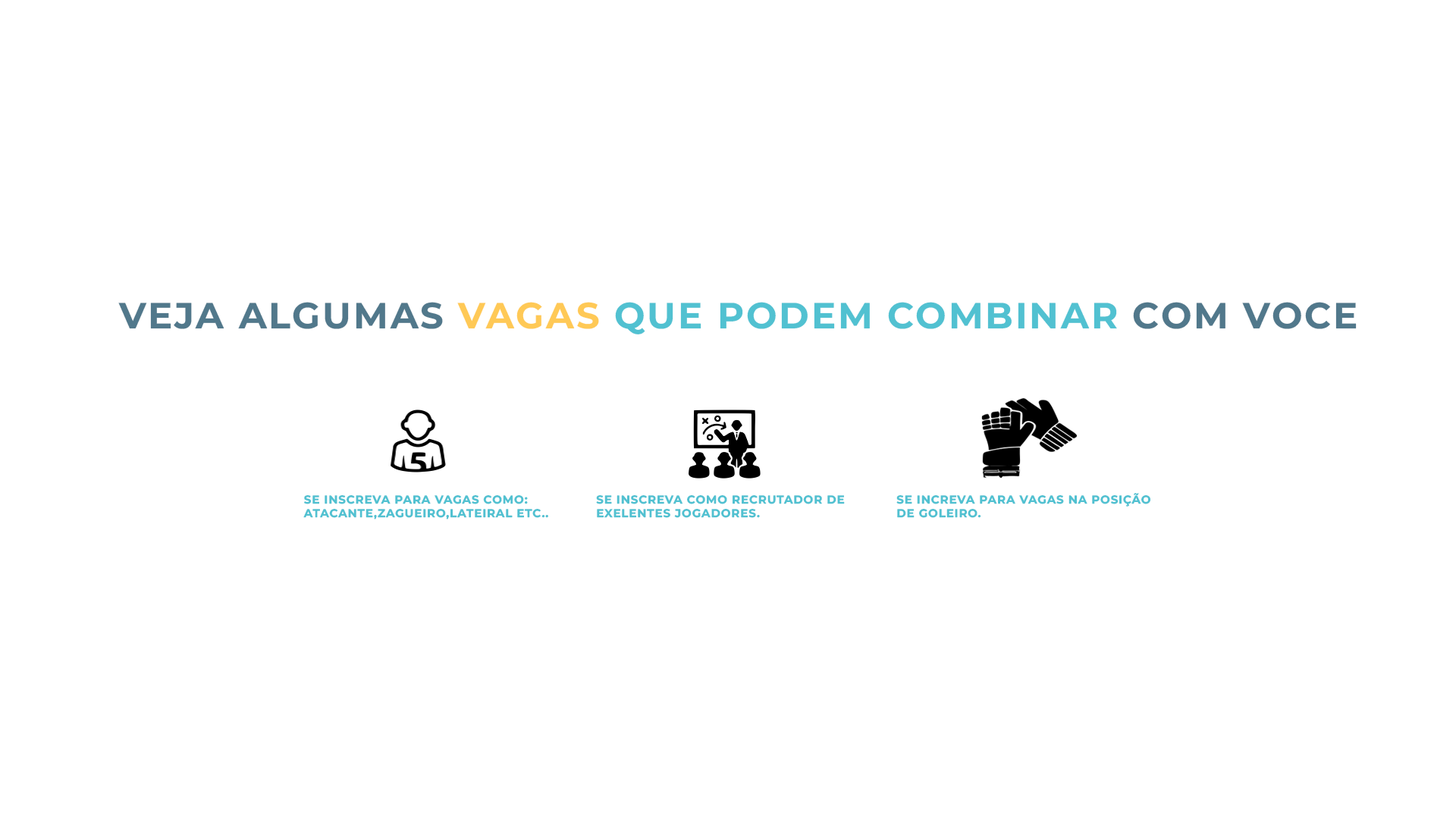
<style>
.page{position:relative;width:1456px;height:819px;background:#ffffff}
.page>*{position:absolute;margin:0}
.t1{font:36.4px "MontserratRoman-Bold";letter-spacing:0.06em;color:#51c1d1}
.t2{font:36.4px "MontserratRoman-Bold";letter-spacing:0.06em;color:#51788b}
.t3{font:36.4px "MontserratRoman-Bold";letter-spacing:0.06em;color:#ffc956}
.t4{font:11.4px "MontserratRoman-Bold";letter-spacing:0.06em;color:#51c1d1}
</style>
<div class="page">
<p class="t1" style="left:118px;top:302px;width:1239px;height:32px"><span class="t2">VEJA ALGUMAS </span><span class="t3">VAGAS </span>QUE PODEM COMBINAR <span class="t2">COM VOCE</span></p>
<p class="t4" style="left:303px;top:495px;width:245px;height:24px;text-align:justify">SE INSCREVA PARA VAGAS COMO:<br>ATACANTE,ZAGUEIRO,LATEIRAL ETC..</p>
<p class="t4" style="left:596px;top:495px;width:249px;height:23px;text-align:justify">SE INSCREVA COMO RECRUTADOR DE<br>EXELENTES JOGADORES.</p>
<p class="t4" style="left:896px;top:493px;width:254px;height:25px;text-align:justify">SE INCREVA PARA VAGAS NA POSIÇÃO<br>DE GOLEIRO.</p>
</div>
